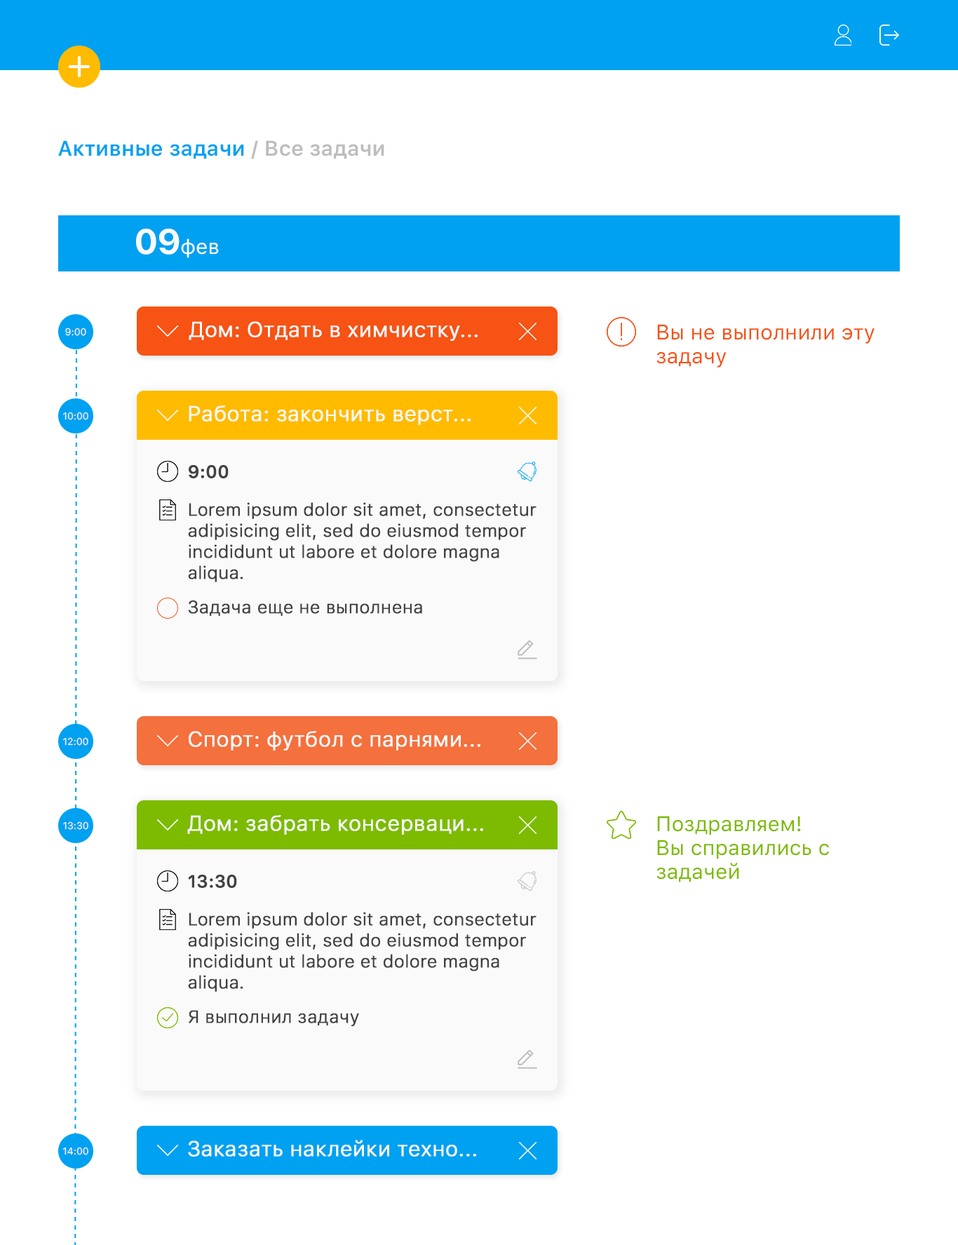
<style>
.page{position:relative;width:958px;height:1245px;background:#ffffff}
.page>*{position:absolute;margin:0}
.t1{font:21px "SFUIText-Semibold";color:#00a1f1}
.t2{font:21px "SFUIText-Semibold";color:#bdbdbd}
.t3{font:21px "SFUIText-Regular";color:#fafafa}
.t4{font:35.1px "SFUIDisplay-Bold";color:#fafafa}
.t5{font:9.8px "SFUIText-Regular";color:#eeeeee}
.t6{font:21px "SFUIText-Light";color:#fafafa;font-weight:bold}
.t7{font:21px/23.8px "SFUIText-Regular";color:#f65314}
.t8{font:17.5px "SFUIText-Medium";color:#424242;font-weight:bold}
.t9{font:17.5px/21px "SFUIText-Light";color:#424242;font-weight:bold}
.t10{font:17.5px "SFUIText-Light";color:#424242;font-weight:bold}
.t11{font:21px/23.8px "SFUIText-Regular";color:#7cbb00}
</style>
<div class="page">
<p class="t1" style="left:58px;top:140px;width:326px;height:19px">Активные задачи <span class="t2">/ Все задачи</span></p>
<p class="t3" style="left:136px;top:229px;width:83px;height:29px"><span class="t4">09</span>фев</p>
<p class="t5" style="left:65px;top:327px;width:21px;height:9px">9:00</p>
<p class="t6" style="left:189px;top:321px;width:289px;height:20px">Дом: Отдать в химчистку...</p>
<p class="t7" style="left:656px;top:324px;width:218px;height:43px">Вы не выполнили эту <br>задачу</p>
<p class="t5" style="left:63px;top:412px;width:25px;height:8px">10:00</p>
<p class="t6" style="left:189px;top:405px;width:282px;height:20px">Работа: закончить верст...</p>
<p class="t8" style="left:189px;top:465px;width:40px;height:13px">9:00</p>
<p class="t9" style="left:188px;top:502px;width:348px;height:80px">Lorem ipsum dolor sit amet, consectetur <br>adipisicing elit, sed do eiusmod tempor <br>incididunt ut labore et dolore magna <br>aliqua.</p>
<p class="t10" style="left:188px;top:600px;width:234px;height:16px">Задача еще не выполнена</p>
<p class="t5" style="left:63px;top:737px;width:25px;height:8px">12:00</p>
<p class="t6" style="left:189px;top:731px;width:291px;height:19px">Спорт: футбол с парнями...</p>
<p class="t5" style="left:63px;top:821px;width:25px;height:9px">13:30</p>
<p class="t6" style="left:187px;top:815px;width:296px;height:20px">Дом: забрать консерваци...</p>
<p class="t11" style="left:656px;top:816px;width:173px;height:66px">Поздравляем! <br>Вы справились с <br>задачей</p>
<p class="t8" style="left:189px;top:874px;width:48px;height:14px">13:30</p>
<p class="t9" style="left:188px;top:912px;width:348px;height:80px">Lorem ipsum dolor sit amet, consectetur <br>adipisicing elit, sed do eiusmod tempor <br>incididunt ut labore et dolore magna <br>aliqua.</p>
<p class="t10" style="left:189px;top:1010px;width:170px;height:16px">Я выполнил задачу</p>
<p class="t6" style="left:188px;top:1140px;width:288px;height:16px">Заказать наклейки техно...</p>
<p class="t5" style="left:62px;top:1147px;width:26px;height:8px">14:00</p>
</div>
